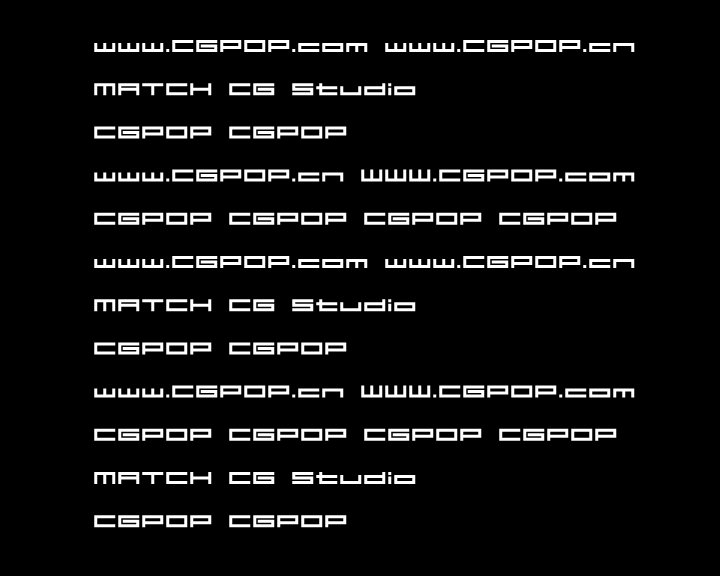
<style>
.page{position:relative;width:720px;height:576px;background:#000000}
.page>*{position:absolute;margin:0}
.t1{font:18px "04b31";color:#ffffff}
</style>
<div class="page">
<p class="t1" style="left:94px;top:40px;width:541px;height:488px">www.CGPOP.com www.CGPOP.cn<br><br>MATCH CG Studio<br><br>CGPOP CGPOP<br><br>www.CGPOP.cn WWW.CGPOP.com<br><br>CGPOP CGPOP CGPOP CGPOP<br><br>www.CGPOP.com www.CGPOP.cn<br><br>MATCH CG Studio<br><br>CGPOP CGPOP<br><br>www.CGPOP.cn WWW.CGPOP.com<br><br>CGPOP CGPOP CGPOP CGPOP<br><br>MATCH CG Studio<br><br>CGPOP CGPOP</p>
</div>
